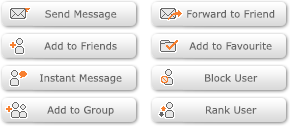
<style>
.page{position:relative;width:290px;height:126px}
.page>*{position:absolute;margin:0}
.t1{font:10px "Verdana";color:#666666}
</style>
<div class="page">
<p class="t1" style="left:45px;top:10px;width:72px;height:10px">Send Message</p>
<p class="t1" style="left:187px;top:10px;width:88px;height:8px">Forward to Friend</p>
<p class="t1" style="left:44px;top:42px;width:73px;height:8px">Add to Friends</p>
<p class="t1" style="left:189px;top:42px;width:83px;height:8px">Add to Favourite</p>
<p class="t1" style="left:40px;top:74px;width:82px;height:10px">Instant Message</p>
<p class="t1" style="left:205px;top:74px;width:53px;height:8px">Block User</p>
<p class="t1" style="left:47px;top:106px;width:67px;height:10px">Add to Group</p>
<p class="t1" style="left:206px;top:106px;width:51px;height:8px">Rank User</p>
</div>
